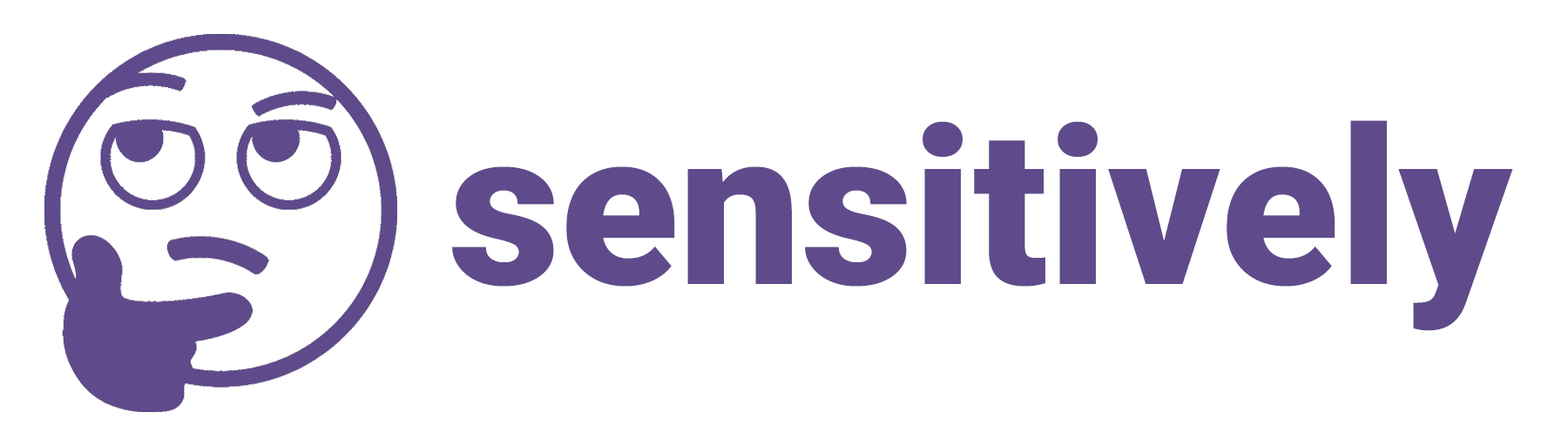
<style>
.page{position:relative;width:1568px;height:446px;background:#ffffff}
.page>*{position:absolute;margin:0}
.t1{font:217.8px "Roboto-Black";color:#5f4b8b}
</style>
<div class="page">
<p class="t1" style="left:452px;top:120px;width:1061px;height:211px">sensitively</p>
</div>
